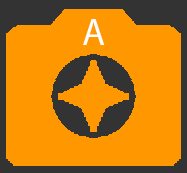
<style>
.page{position:relative;width:187px;height:173px;background:#ff9800}
.page>*{position:absolute;margin:0}
.t1{font:37.7px "MyriadPro-Regular";color:#ffffff}
</style>
<div class="page">
<p class="t1" style="left:83px;top:19px;width:22px;height:26px">A</p>
</div>
